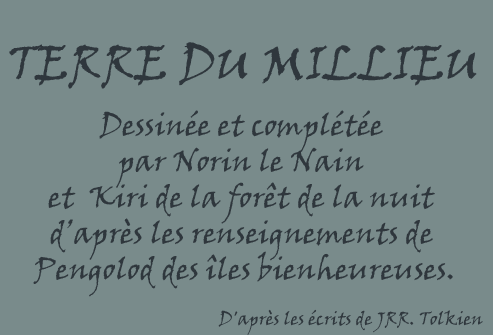
<style>
.page{position:relative;width:493px;height:335px;background:#798b8b}
.page>*{position:absolute;margin:0}
.t1{font:48px "VinerHandITC";color:#2f373d}
.t2{font:30px "VinerHandITC";color:#2f373d}
.t3{font:18px "VinerHandITC";color:#2f373d}
</style>
<div class="page">
<p class="t1" style="left:9px;top:42px;width:468px;height:47px">TERRE DU MILLIEU</p>
<p class="t2" style="left:33px;top:110px;width:420px;height:187px;text-align:center">Dessinée et complétée <br>par Norin le Nain <br>et  Kiri de la forêt de la nuit <br>d’après les renseignements de <br>Pengolod des îles bienheureuses.</p>
<p class="t3" style="left:218px;top:309px;width:265px;height:26px">D'après les écrits de JRR. Tolkien</p>
</div>
